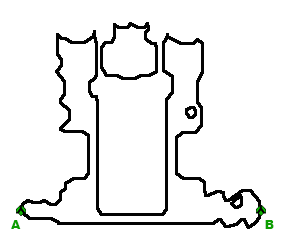
<style>
.page{position:relative;width:284px;height:250px;background:#ffffff}
.page>*{position:absolute;margin:0}
.t1{font:12px "Arial-Black";color:#0d9e01}
</style>
<div class="page">
<p class="t1" style="left:11px;top:220px;width:10px;height:9px">A</p>
<p class="t1" style="left:265px;top:220px;width:9px;height:9px">B</p>
</div>
